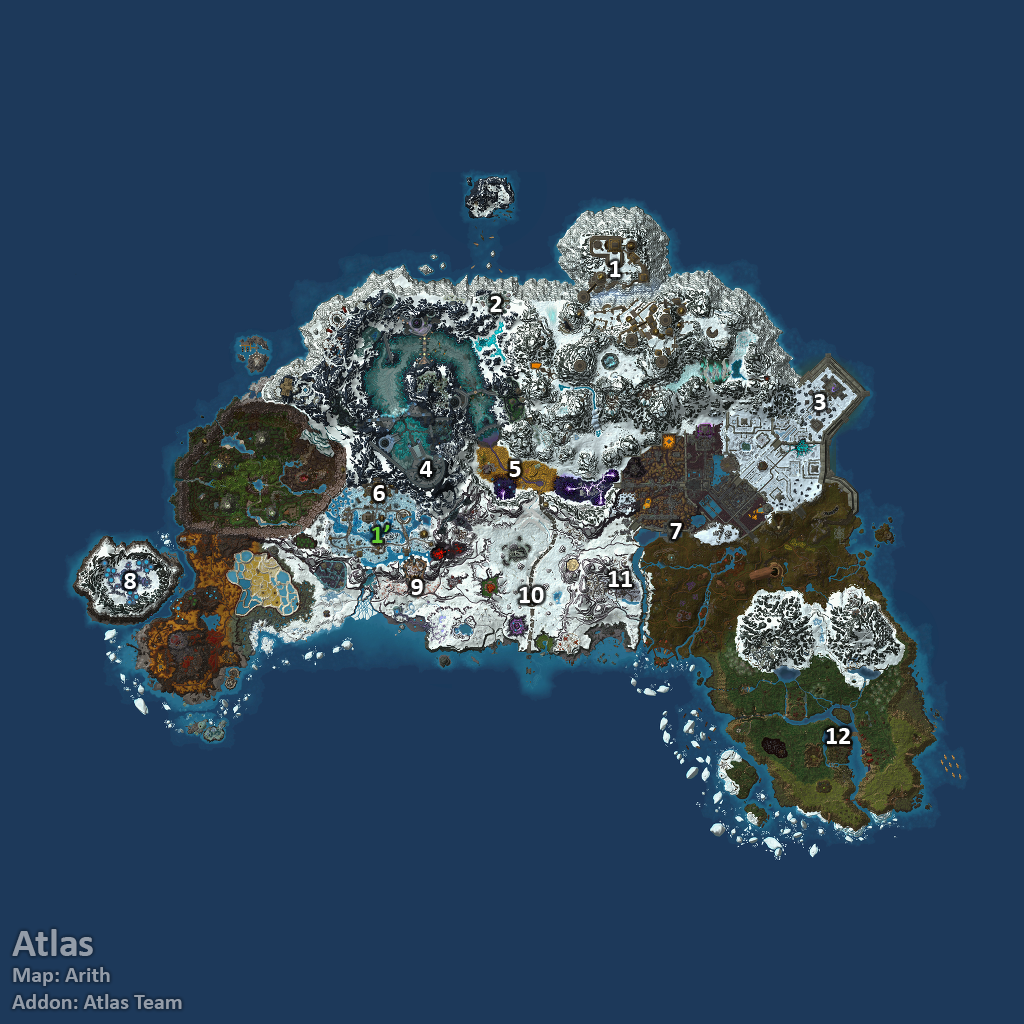
<style>
.page{position:relative;width:1024px;height:1024px;background:#1d395a}
.page>*{position:absolute;margin:0}
.t1{font:26px "Calibri-Bold";color:#ffffff}
.t2{font:26px "Calibri-Bold";color:#66cc33}
.t3{font:22px "Calibri-Bold";color:#939ca8}
.t4{font:40px "Calibri-Bold";color:#939ca8}
</style>
<div class="page">
<p class="t1" style="left:610px;top:261px;width:11px;height:16px">1</p>
<p class="t1" style="left:490px;top:296px;width:12px;height:16px">2</p>
<p class="t1" style="left:814px;top:394px;width:12px;height:16px">3</p>
<p class="t1" style="left:419px;top:461px;width:14px;height:16px">4</p>
<p class="t1" style="left:509px;top:461px;width:12px;height:16px">5</p>
<p class="t1" style="left:373px;top:485px;width:12px;height:16px">6</p>
<p class="t2" style="left:372px;top:525px;width:18px;height:18px">1’</p>
<p class="t1" style="left:670px;top:523px;width:12px;height:16px">7</p>
<p class="t1" style="left:124px;top:573px;width:12px;height:16px">8</p>
<p class="t1" style="left:411px;top:579px;width:12px;height:16px">9</p>
<p class="t1" style="left:608px;top:571px;width:24px;height:16px">11</p>
<p class="t1" style="left:519px;top:587px;width:25px;height:16px">10</p>
<p class="t1" style="left:826px;top:728px;width:25px;height:16px">12</p>
<p class="t3" style="left:12px;top:929px;width:170px;height:80px"><span class="t4">Atlas<br></span>Map: Arith<br>Addon: Atlas Team</p>
</div>
